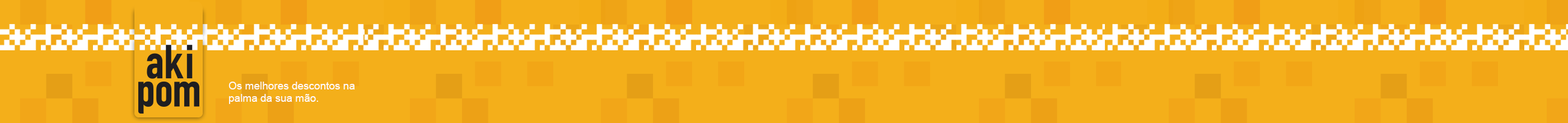
<style>
.page{position:relative;width:1568px;height:123px;background:#f4af1a}
.page>*{position:absolute;margin:0}
.t1{font:10.6px "ArialMT";color:#fefbfb}
</style>
<div class="page">
<p class="t1" style="left:228px;top:82px;width:127px;height:22px">Os melhores descontos na<br>palma da sua mão.</p>
</div>
